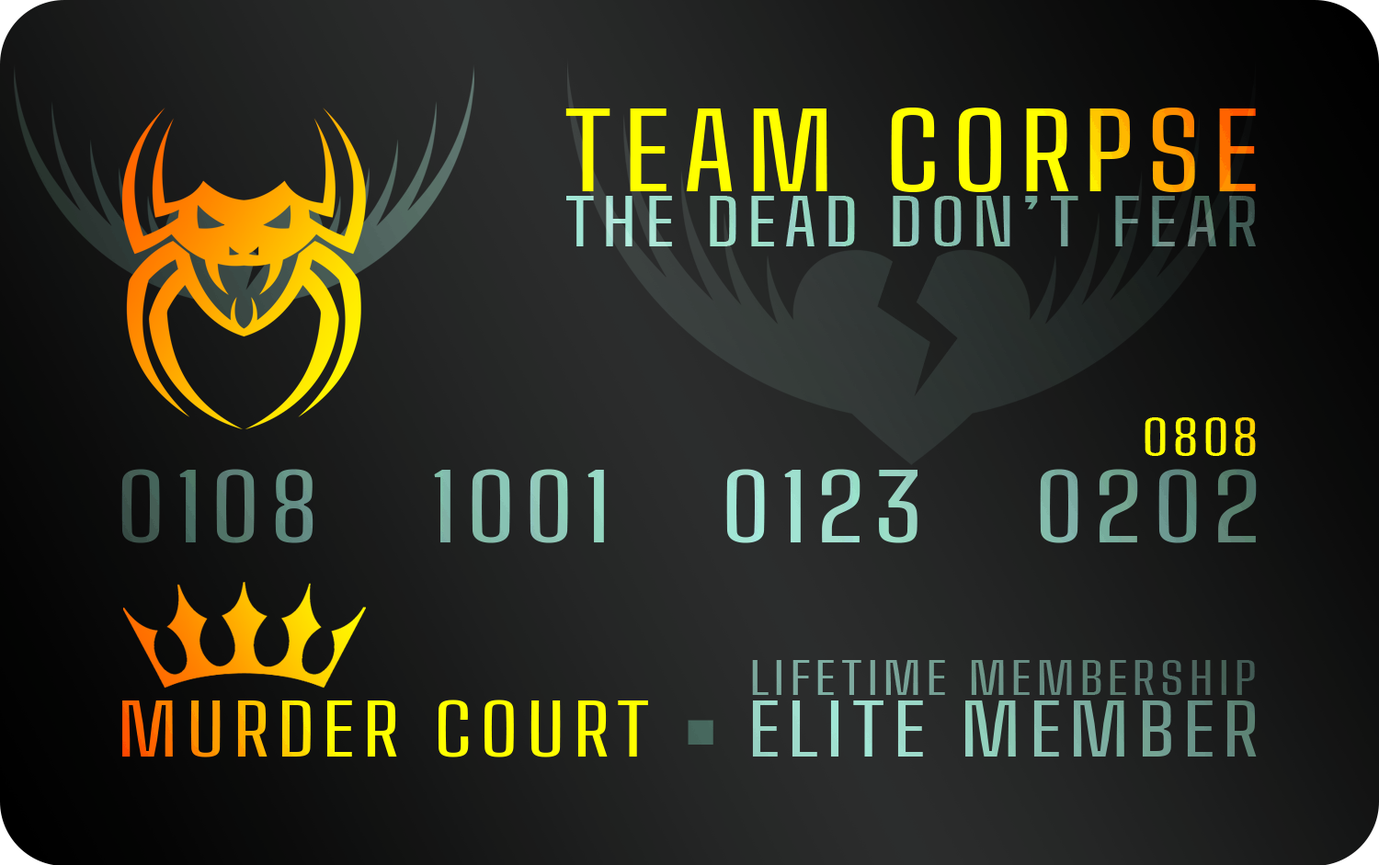
<style>
.page{position:relative;width:1379px;height:865px}
.page>*{position:absolute;margin:0}
.t1{font:101.6px "BigShouldersText-Regular";letter-spacing:0.075em;color:#fff600;text-transform:uppercase;scale:1.33 1}
.t2{font:63.5px "BigShouldersText-Regular";letter-spacing:0.075em;text-transform:uppercase;scale:1.33 1}
.t3{font:48.3px "BigShouldersText-Regular";letter-spacing:0.05em;color:#fff600;text-transform:uppercase;scale:1.33 1}
.t4{font:89.6px "BigShouldersText-Regular";letter-spacing:0.075em;text-transform:uppercase;scale:1.33 1}
.t5{font:43.8px "BigShouldersText-Regular";letter-spacing:0.075em;text-transform:uppercase;scale:1.33 1}
.t6{font:69.9px "BigShouldersText-Regular";letter-spacing:0.075em;text-transform:uppercase;scale:1.33 1}
.t7{font:60.8px "BigShouldersText-Regular";letter-spacing:0.075em;text-transform:uppercase}
</style>
<div class="page">
<p class="t1" style="left:565px;top:108px;width:691px;height:84px">Team Corpse</p>
<p class="t2" style="left:566px;top:196px;width:690px;height:50px">The dead don’t fear</p>
<p class="t3" style="left:1144px;top:417px;width:112px;height:39px">0808</p>
<p class="t4" style="left:121px;top:469px;width:1135px;height:74px">0108   1001   0123   0202</p>
<p class="t5" style="left:752px;top:660px;width:503px;height:35px">Lifetime membership</p>
<p class="t6" style="left:122px;top:699px;width:1134px;height:58px">Murder Court <span class="t7">■</span> Elite Member</p>
</div>
